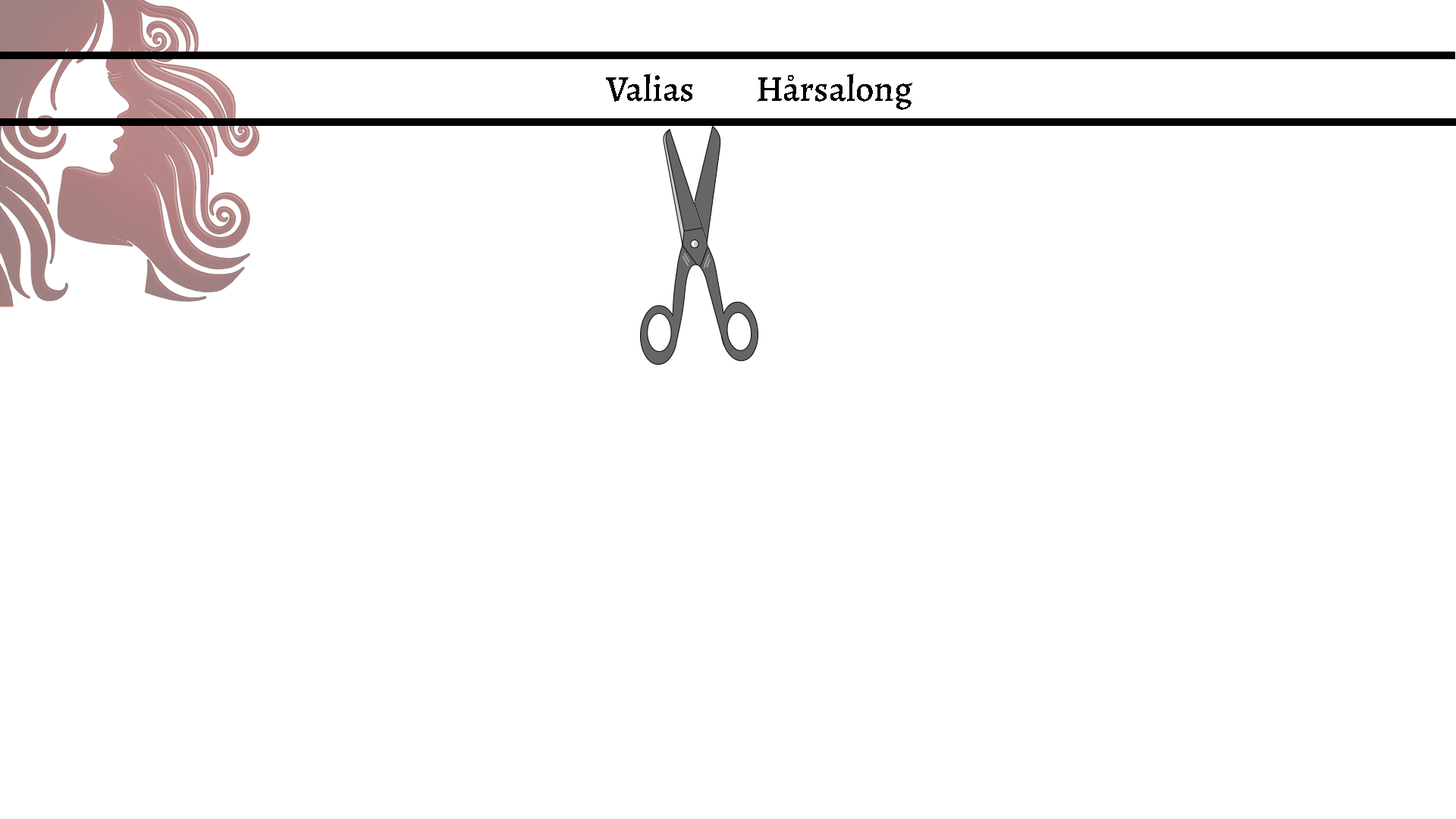
<style>
.page{position:relative;width:1456px;height:819px;background:#ffffff}
.page>*{position:absolute;margin:0}
.t1{font:36.4px "Alegreya-Medium";color:#000000}
</style>
<div class="page">
<p class="t1" style="left:606px;top:74px;width:306px;height:36px">Valias         Hårsalong</p>
</div>
